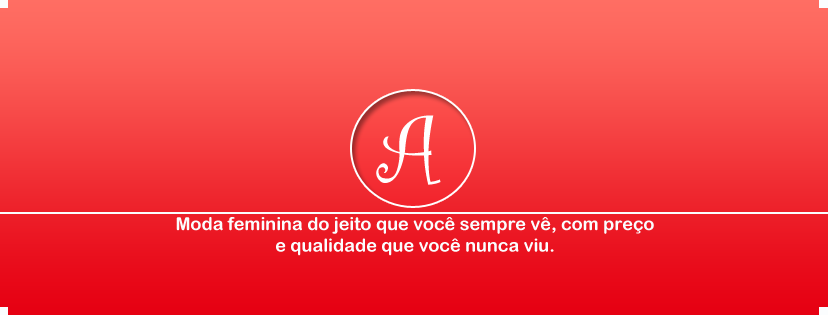
<style>
.page{position:relative;width:828px;height:315px}
.page>*{position:absolute;margin:0}
.t1{font:100px "CurlzMT";color:#fbfdfe}
.t2{font:18px "ArialRoundedMTBold";color:#fbfdfe}
</style>
<div class="page">
<p class="t1" style="left:376px;top:115px;width:65px;height:70px">A</p>
<p class="t2" style="left:176px;top:217px;width:478px;height:39px;text-align:center">Moda feminina do jeito que você sempre vê, com preço<br>e qualidade que você nunca viu.</p>
</div>
